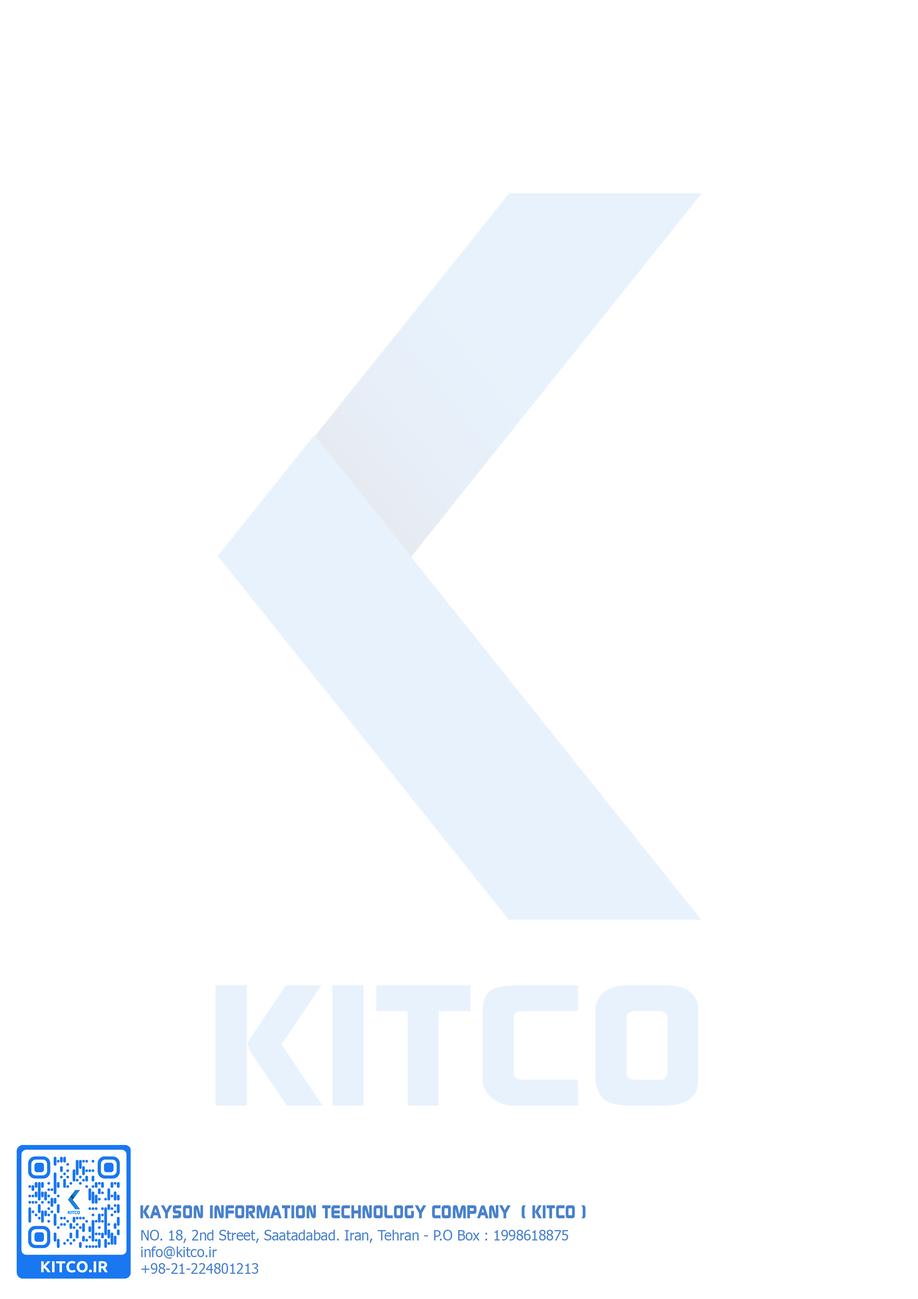
<style>
.page{position:relative;width:918px;height:1299px;background:#ffffff}
.page>*{position:absolute;margin:0}
.t1{font:18.5px "ModaerneHeavy";color:#4781cd}
.t2{font:13.9px "Tahoma";color:#4781cd}
</style>
<div class="page">
<p class="t1" style="left:140px;top:1205px;width:446px;height:13px">KAYSON INFORMATION TECHNOLOGY COMPANY  ( KITCO )</p>
<p class="t2" style="left:141px;top:1230px;width:427px;height:44px">NO. 18, 2nd Street, Saatadabad. Iran, Tehran - P.O Box : 1998618875<br>info@kitco.ir<br>+98-21-224801213</p>
</div>
